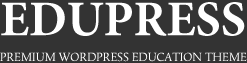
<style>
.page{position:relative;width:247px;height:63px;background:#333333}
.page>*{position:absolute;margin:0}
.t1{font:50px "MinionPro-Bold";color:#ffffff;text-transform:uppercase}
.t2{font:14px "Tallys";color:#ffffff;text-transform:uppercase}
</style>
<div class="page">
<p class="t1" style="left:1px;top:2px;width:244px;height:34px">EDUPRESS</p>
<p class="t2" style="left:0px;top:52px;width:247px;height:10px">premium wordpress education theme</p>
</div>
